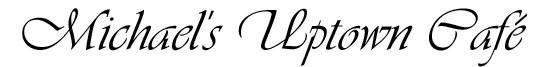
<style>
.page{position:relative;width:548px;height:67px;background:#ffffff}
.page>*{position:absolute;margin:0}
.t1{font:60px "Vivaldii";color:#000000}
</style>
<div class="page">
<p class="t1" style="left:22px;top:8px;width:504px;height:59px">Michael's Uptown Cafe</p>
</div>
